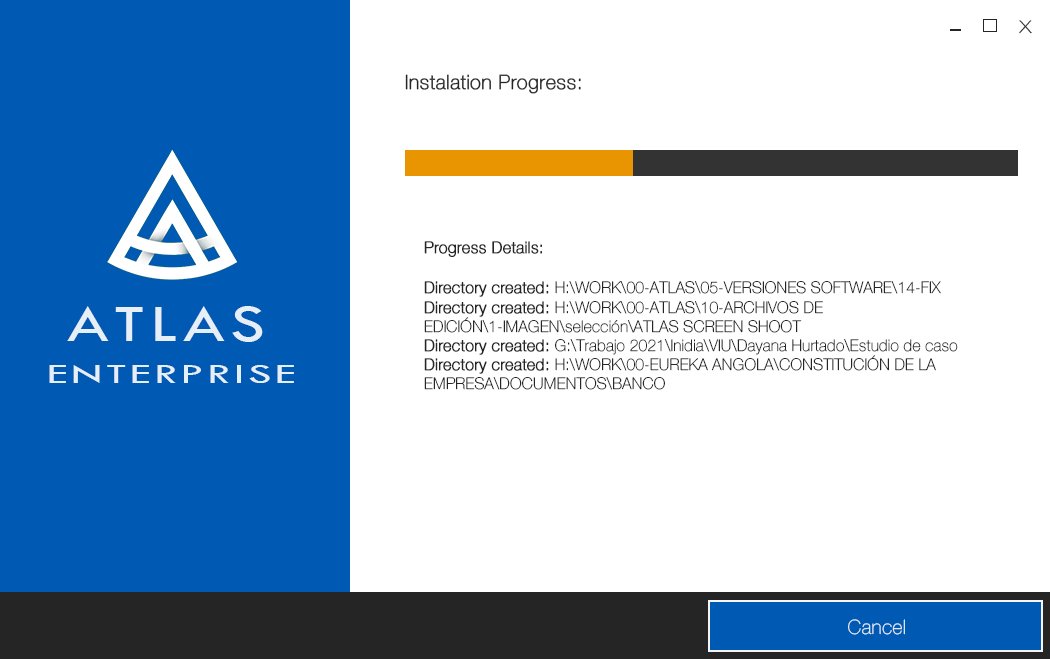
<style>
.page{position:relative;width:1050px;height:659px;background:#ffffff}
.page>*{position:absolute;margin:0}
.t1{font:24px "HelveticaNeue-Thin";color:#252526;scale:1.2 1}
.t2{font:20px "HelveticaNeue-Thin";color:#252526;font-weight:bold}
.t3{font:16px "HelveticaNeue-Thin";color:#252526}
.t4{font:18px "HelveticaNeue-Thin";color:#252526;text-transform:uppercase;font-weight:bold}
.t5{font:16px "HelveticaNeue-Thin";color:#252526;font-weight:bold}
.t6{font:54px "TwCenMT-Regular";letter-spacing:0.075em;color:#e6eff8;scale:1.3 1}
.t7{font:28.8px "TwCenMT-Regular";letter-spacing:0.075em;color:#e6eff8;scale:1.62 1}
.t8{font:20px "HelveticaNeue-Thin";color:#e6eff8}
</style>
<div class="page">
<p class="t1" style="left:1019px;top:20px;width:13px;height:14px">x</p>
<p class="t2" style="left:405px;top:74px;width:176px;height:20px">Instalation Progress:</p>
<p class="t3" style="left:424px;top:241px;width:534px;height:149px"><span class="t4"><br><br><br><br><br></span><span class="t5">Progress Details:<br><br>Directory created: </span>H:\WORK\00-ATLAS\05-VERSIONES SOFTWARE\14-FIX<br><span class="t5">Directory created: </span>H:\WORK\00-ATLAS\10-ARCHIVOS DE EDICIÓN\1-IMAGEN\selección\ATLAS SCREEN SHOOT<br><span class="t5">Directory created: </span>G:\Trabajo 2021\Inidia\VIU\Dayana Hurtado\Estudio de caso<br><span class="t5">Directory created: </span>H:\WORK\00-EUREKA ANGOLA\CONSTITUCIÓN DE LA EMPRESA\DOCUMENTOS\BANCO</p>
<p class="t6" style="left:67px;top:306px;width:196px;height:36px">ATLAS</p>
<p class="t7" style="left:49px;top:365px;width:245px;height:18px">ENTERPRISE</p>
<p class="t8" style="left:848px;top:619px;width:57px;height:16px">Cancel</p>
</div>
